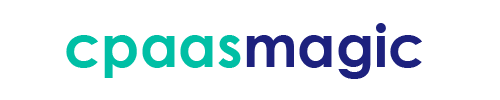
<style>
.page{position:relative;width:500px;height:100px;background:#ffffff}
.page>*{position:absolute;margin:0}
.t1{font:58.3px "CenturyGothic-Bold";color:#00bfa5}
.t2{font:58.3px "CenturyGothic-Bold";color:#1d217e}
</style>
<div class="page">
<p class="t1" style="left:66px;top:23px;width:356px;height:56px">cpaas<span class="t2">magic</span></p>
</div>
